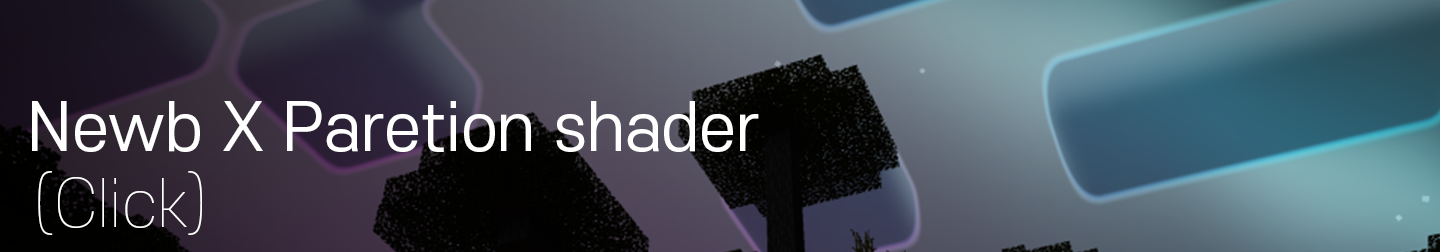
<style>
.page{position:relative;width:1440px;height:252px}
.page>*{position:absolute;margin:0}
.t1{font:64px "S-CoreDream-4Regular";color:#ffffff}
.t2{font:64px "S-CoreDream-1Thin";color:#ffffff}
</style>
<div class="page">
<p class="t1" style="left:32px;top:101px;width:727px;height:51px">Newb X Paretion shader</p>
<p class="t2" style="left:38px;top:171px;width:164px;height:64px">(Click)</p>
</div>
